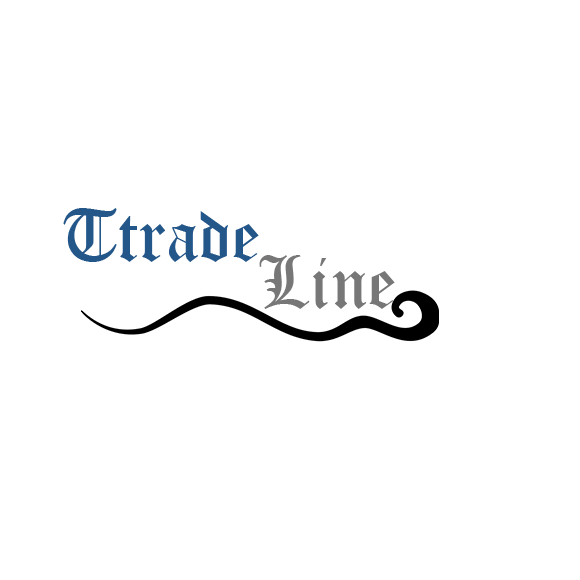
<style>
.page{position:relative;width:580px;height:580px;background:#ffffff}
.page>*{position:absolute;margin:0}
.t1{font:72px "OldEnglishTextMT";color:#235689}
.t2{font:72px "OldEnglishTextMT";color:#777777}
</style>
<div class="page">
<p class="t1" style="left:63px;top:208px;width:196px;height:54px">Ttrade</p>
<p class="t2" style="left:259px;top:255px;width:136px;height:54px">Line</p>
</div>
